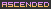
<style>
.page{position:relative;width:51px;height:9px;background:#333333}
.page>*{position:absolute;margin:0}
.t1{font:8px "5x5-Pixel"}
</style>
<div class="page">
<p class="t1" style="left:2px;top:2px;width:47px;height:5px">ascended</p>
</div>
